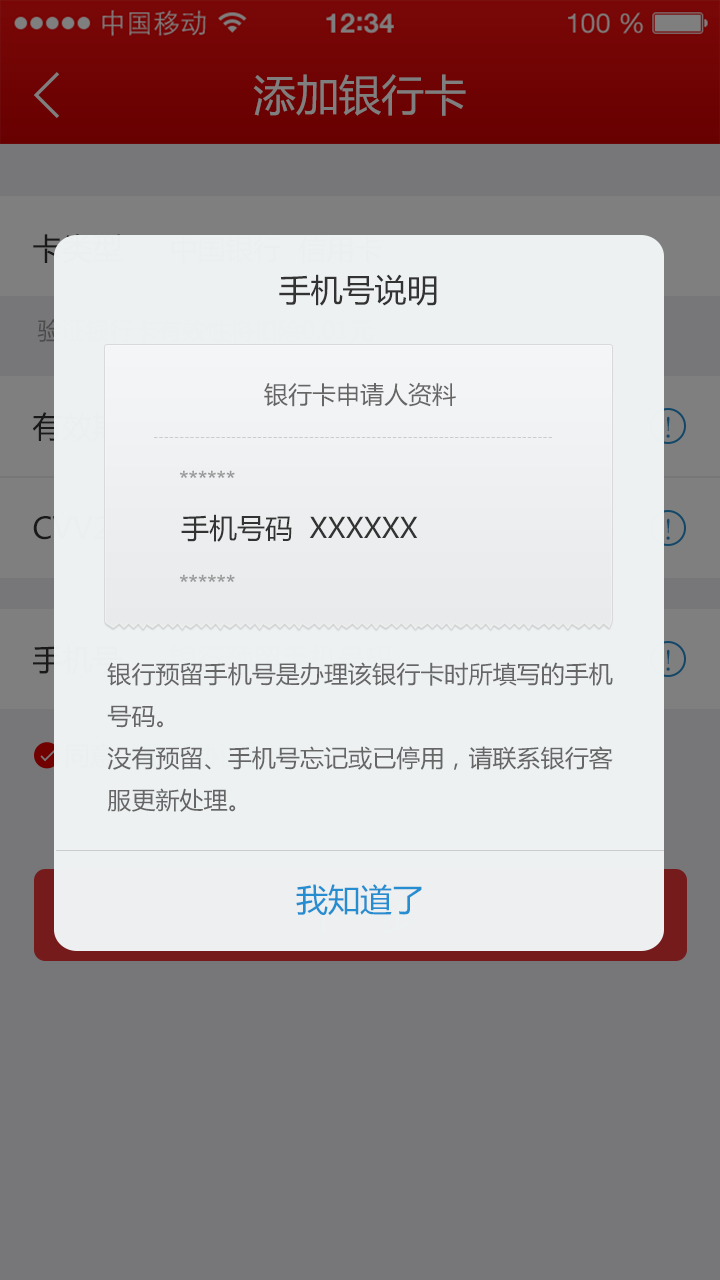
<style>
.page{position:relative;width:720px;height:1280px;background:#77777a}
.page>*{position:absolute;margin:0}
.t1{font:42.7px "MicrosoftYaHei";color:#7f7f7f}
.t2{font:32px "MicrosoftYaHei";color:#333333}
.t3{font:24px "MicrosoftYaHei";color:#666666}
.t4{font:30px "YouYuan";color:#134768}
.t5{font:12px "MicrosoftYaHei";color:#cccccc}
.t6{font:24px "ArialMT";color:#999999}
.t7{font:28px "MicrosoftYaHei";color:#333333}
.t8{font:32.1px "MicrosoftYaHei";color:#268ed0}
</style>
<div class="page">
<p class="t1" style="left:253px;top:74px;width:213px;height:42px">添加银行卡</p>
<p class="t2" style="left:279px;top:274px;width:158px;height:32px">手机号说明</p>
<p class="t3" style="left:264px;top:382px;width:192px;height:25px">银行卡申请人资料</p>
<p class="t4" style="left:666px;top:416px;width:4px;height:22px">!</p>
<p class="t5" style="left:154px;top:437px;width:398px;height:1px">-----------------------------------------------------------------------------</p>
<p class="t6" style="left:179px;top:470px;width:56px;height:8px">******</p>
<p class="t7" style="left:181px;top:514px;width:237px;height:28px">手机号码  XXXXXX</p>
<p class="t4" style="left:666px;top:518px;width:4px;height:22px">!</p>
<p class="t6" style="left:179px;top:574px;width:56px;height:8px">******</p>
<p class="t4" style="left:666px;top:649px;width:4px;height:22px">!</p>
<p class="t3" style="left:107px;top:662px;width:506px;height:150px">银行预留手机号是办理该银行卡时所填写的手机号码。<br>没有预留、手机号忘记或已停用，请联系银行客服更新处理。</p>
<p class="t8" style="left:296px;top:884px;width:126px;height:32px">我知道了</p>
</div>
